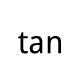
<style>
.page{position:relative;width:80px;height:80px;background:#ffffff}
.page>*{position:absolute;margin:0}
.t1{font:31.8px "DroidSans";color:#000000}
</style>
<div class="page">
<p class="t1" style="left:18px;top:32px;width:43px;height:22px">tan</p>
</div>
